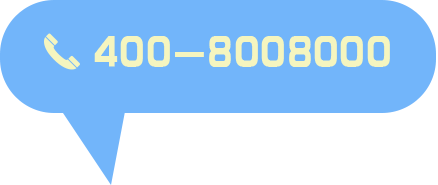
<style>
.page{position:relative;width:438px;height:185px;background:#72b5fa}
.page>*{position:absolute;margin:0}
.t1{font:48px "HYk1gj";letter-spacing:0.05em;color:#f5f5bf}
</style>
<div class="page">
<p class="t1" style="left:94px;top:36px;width:296px;height:31px">400-8008000</p>
</div>
